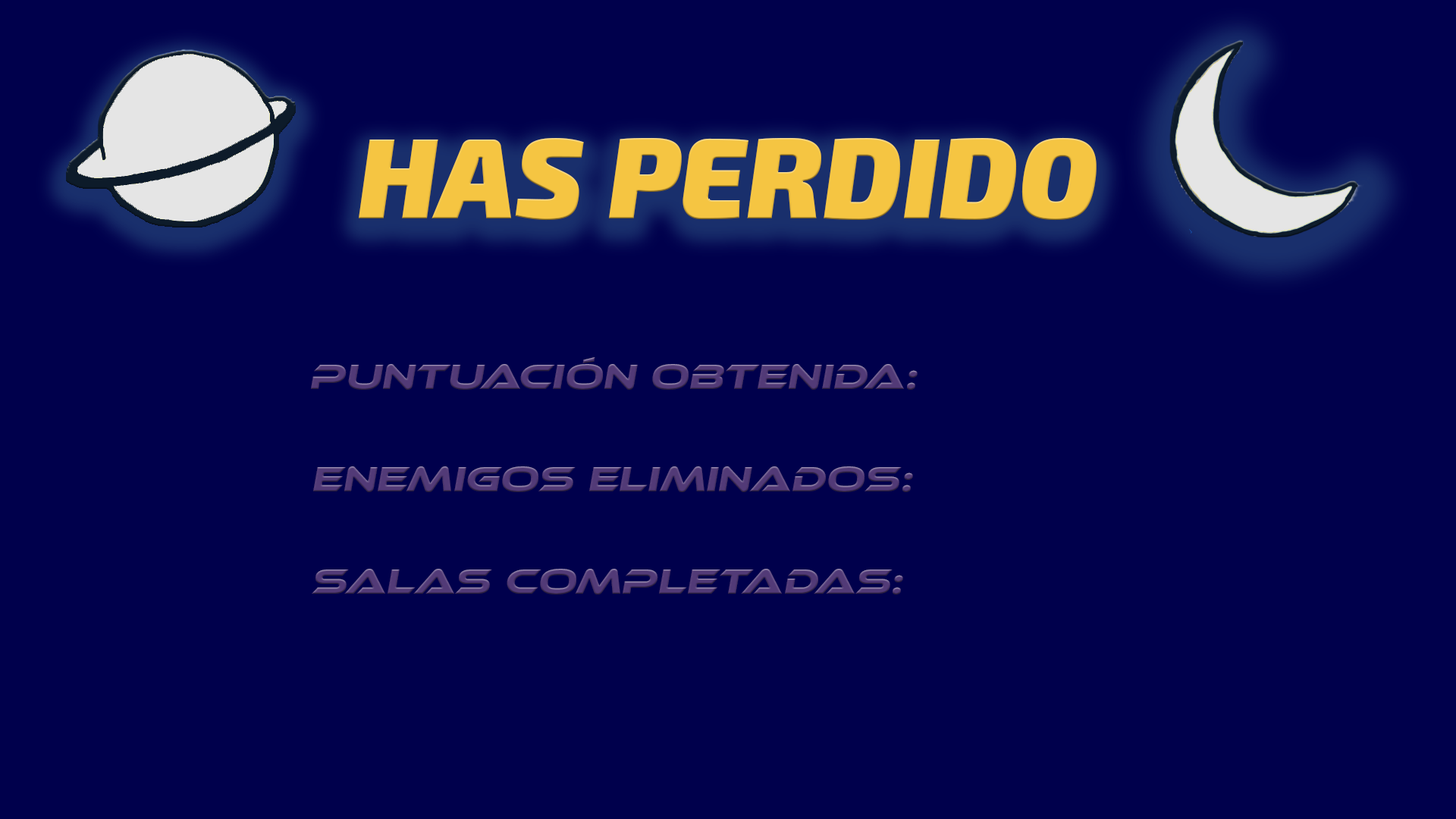
<style>
.page{position:relative;width:1456px;height:819px;background:#00004c}
.page>*{position:absolute;margin:0}
.t1{font:113.7px "Exo2-BlackItalic";color:#f5c542}
.t2{font:36.4px "EthnocentricRg-Italic";color:#533b78}
</style>
<div class="page">
<p class="t1" style="left:359px;top:137px;width:738px;height:84px">HAS PERDIDO</p>
<p class="t2" style="left:311px;top:357px;width:607px;height:33px">Puntuación obtenida:</p>
<p class="t2" style="left:313px;top:466px;width:600px;height:26px">enemigos eliminados:</p>
<p class="t2" style="left:312px;top:569px;width:591px;height:26px">Salas completadas:</p>
</div>
